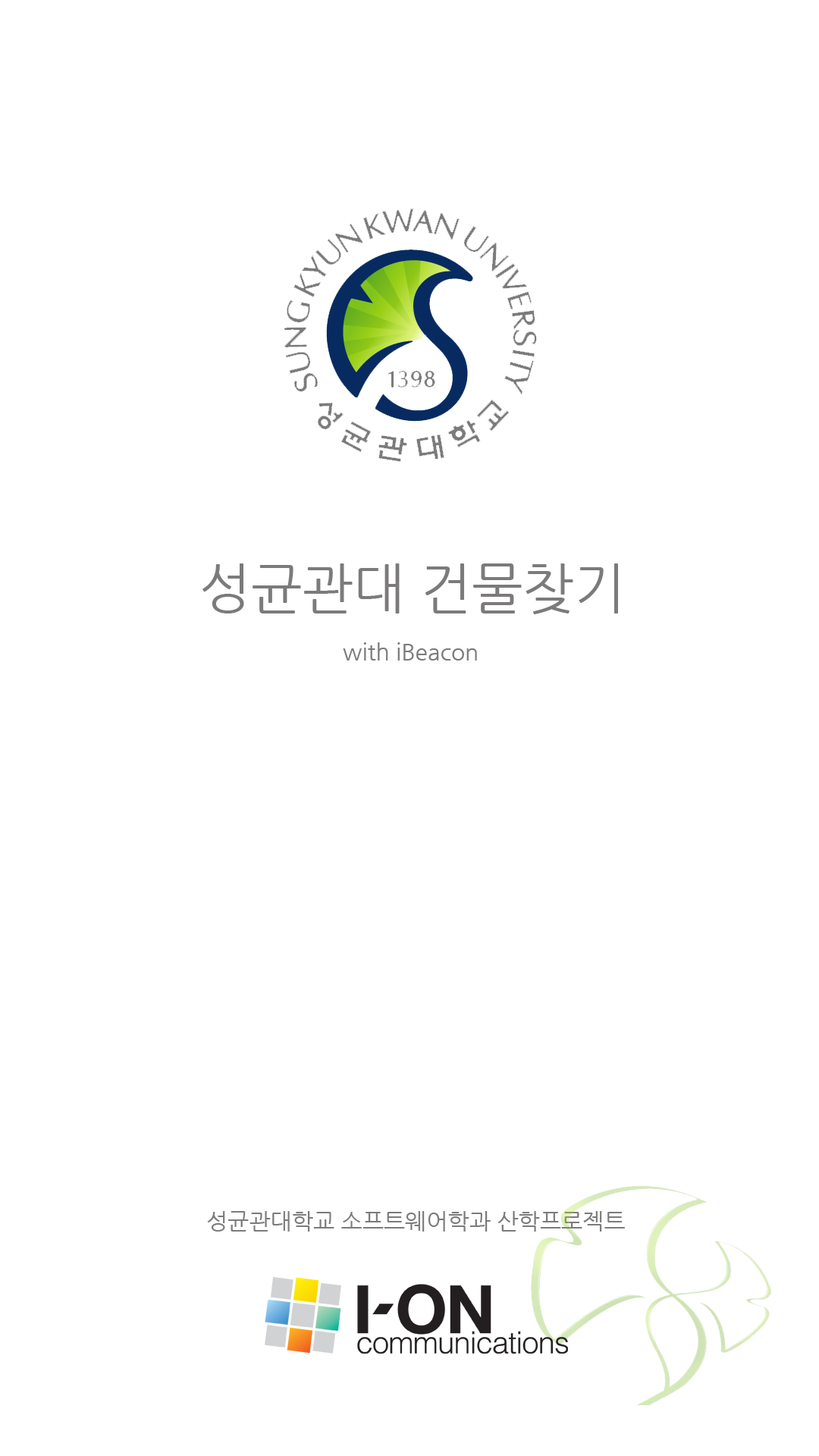
<style>
.page{position:relative;width:819px;height:1456px;background:#ffffff}
.page>*{position:absolute;margin:0}
.t1{font:54.6px "NanumGothic";color:#7c7a7b}
.t2{font:22.7px "NanumGothic";color:#7c7a7b}
</style>
<div class="page">
<p class="t1" style="left:202px;top:563px;width:416px;height:51px">성균관대 건물찾기</p>
<p class="t2" style="left:343px;top:642px;width:134px;height:18px">with iBeacon</p>
<p class="t2" style="left:207px;top:1211px;width:418px;height:21px">성균관대학교 소프트웨어학과 산학프로젝트</p>
</div>
